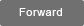
<style>
.page{position:relative;width:84px;height:26px;background:#707070}
.page>*{position:absolute;margin:0}
.t1{font:11px "ArialMT";letter-spacing:0.05em;color:#ffffff}
</style>
<div class="page">
<p class="t1" style="left:19px;top:8px;width:43px;height:8px">Forward</p>
</div>
